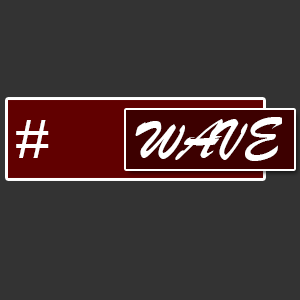
<style>
.page{position:relative;width:300px;height:300px;background:#333333}
.page>*{position:absolute;margin:0}
.t1{font:60px "BrushScriptMT";color:#ffffff}
</style>
<div class="page">
<p class="t1" style="left:16px;top:120px;width:33px;height:38px">#</p>
<p class="t1" style="left:135px;top:117px;width:147px;height:44px">WAVE</p>
</div>
